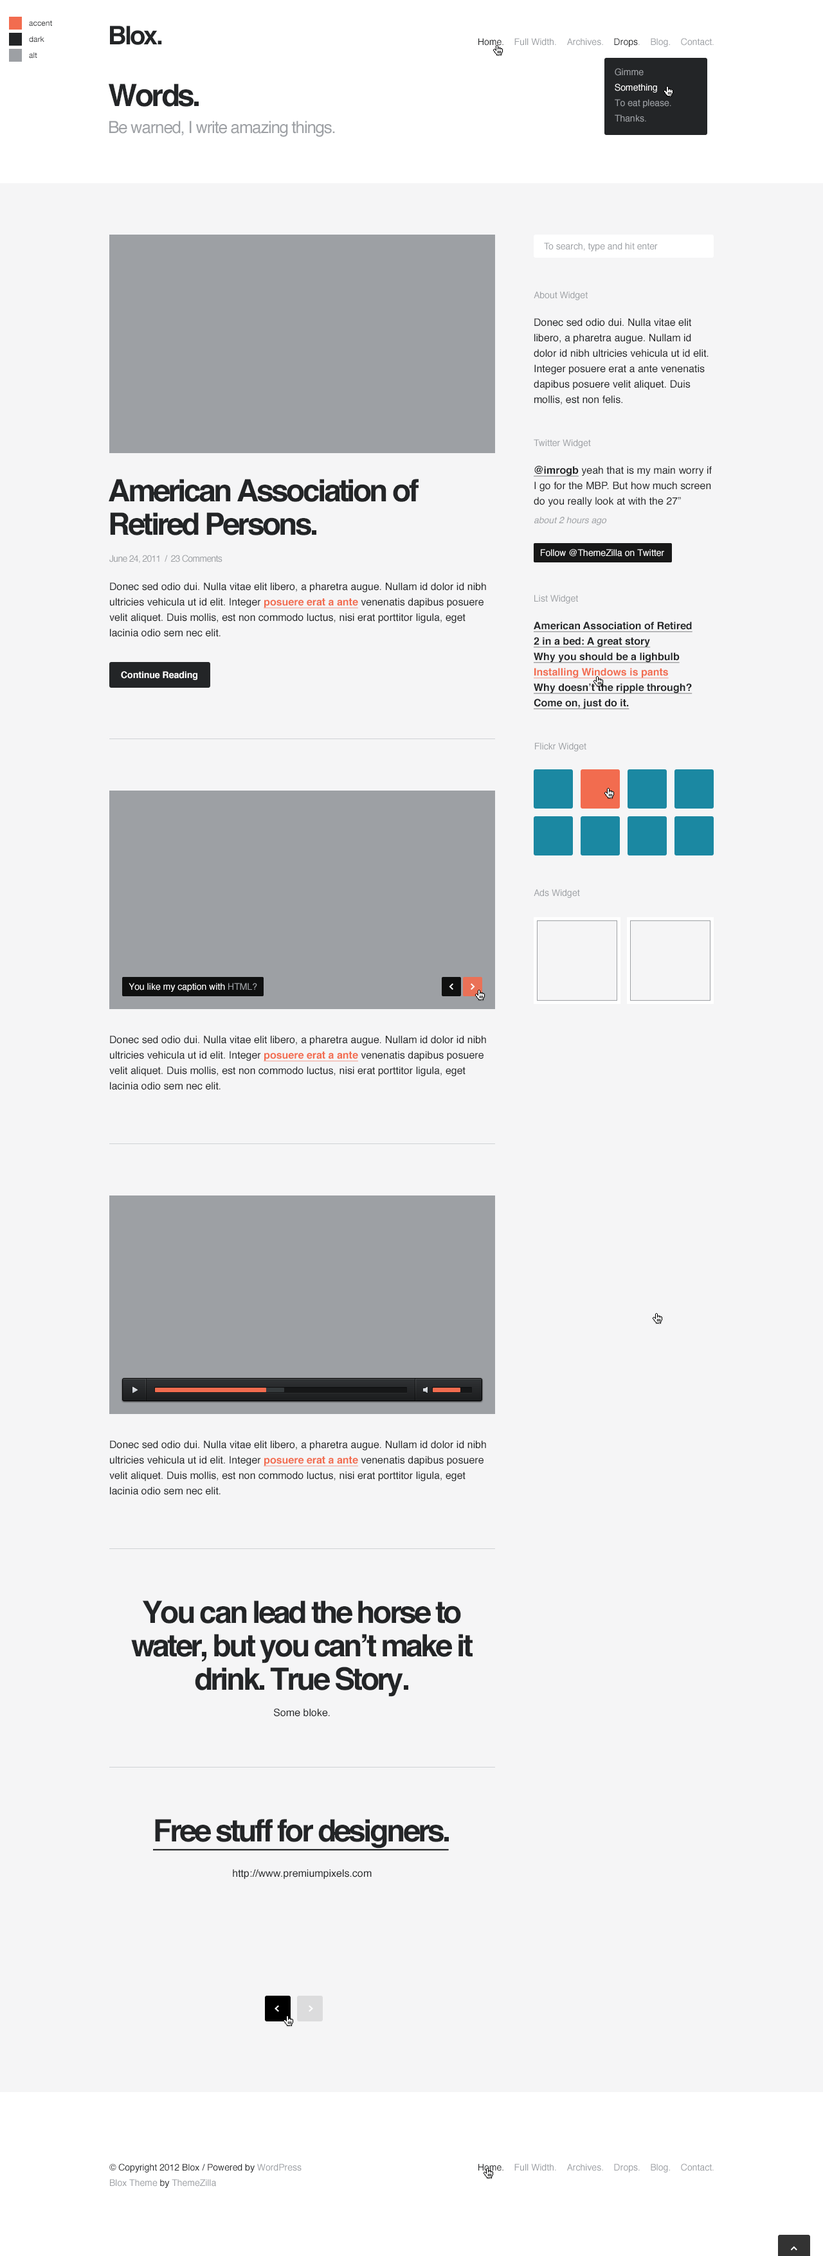
<style>
.page{position:relative;width:823px;height:2256px;background:#f5f5f6}
.page>*{position:absolute;margin:0}
.t1{font:7.7px/16.1px "HelveticaNeue";color:#2c2d31}
.t2{font:25.7px "Helvetica-Bold";letter-spacing:-0.075em;color:#232527}
.t3{font:9px "Helvetica";color:#9da0a4}
.t4{font:9px "Helvetica";color:#232527}
.t5{font:9px/15.4px "Helvetica";color:#9da0a4}
.t6{font:9px/15.4px "Helvetica";color:#ffffff}
.t7{font:30.9px "Helvetica-Bold";letter-spacing:-0.075em;color:#232527}
.t8{font:16.7px "Helvetica";letter-spacing:-0.05em;color:#9da0a4}
.t9{font:10.3px/15.4px "Helvetica";color:#232527}
.t10{font:10.3px/15.4px "Helvetica-Bold";color:#232527;text-decoration:underline}
.t11{font:30.9px/33.4px "Helvetica-Bold";letter-spacing:-0.075em;color:#232527}
.t12{font:9px "Helvetica-Oblique";color:#9da0a4}
.t13{font:9px "Helvetica";letter-spacing:-0.05em;color:#9da0a4}
.t14{font:9px "Helvetica";color:#ffffff}
.t15{font:10.3px/15.4px "Helvetica-Bold";color:#f26c4f;text-decoration:underline}
.t16{font:9px "Helvetica-Bold";color:#ffffff}
.t17{font:10.3px "Helvetica";color:#232527}
.t18{font:30.9px "Helvetica-Bold";letter-spacing:-0.075em;color:#232527;text-decoration:underline}
.t19{font:9px/15.4px "Helvetica";color:#232527}
</style>
<div class="page">
<p class="t1" style="left:29px;top:21px;width:23px;height:38px">accent<br>dark<br>alt</p>
<p class="t2" style="left:110px;top:26px;width:52px;height:19px">Blox.</p>
<p class="t3" style="left:478px;top:38px;width:236px;height:9px"><span class="t4">Home.</span>    Full Width.    Archives.    <span class="t4">Drops</span>.    Blog.    Contact.</p>
<p class="t5" style="left:615px;top:68px;width:56px;height:54px">Gimme<br><span class="t6">Something<br></span>To eat please.<br>Thanks.</p>
<p class="t7" style="left:109px;top:84px;width:90px;height:23px">Words.</p>
<p class="t8" style="left:109px;top:121px;width:226px;height:16px">Be warned, I write amazing things.</p>
<p class="t3" style="left:544px;top:242px;width:114px;height:9px">To search, type and hit enter</p>
<p class="t3" style="left:534px;top:291px;width:54px;height:9px">About Widget</p>
<p class="t9" style="left:534px;top:318px;width:174px;height:87px">Donec sed odio dui. Nulla vitae elit libero, a pharetra augue. Nullam id dolor id nibh ultricies vehicula ut id elit. Integer posuere erat a ante venenatis dapibus posuere velit aliquet. Duis mollis, est non felis.</p>
<p class="t3" style="left:534px;top:439px;width:57px;height:9px">Twitter Widget</p>
<p class="t9" style="left:534px;top:465px;width:178px;height:42px"><span class="t10">@imrogb</span> yeah that is my main worry if I go for the MBP. But how much screen do you really look at with the 27”</p>
<p class="t11" style="left:109px;top:479px;width:310px;height:57px">American Association of Retired Persons.</p>
<p class="t12" style="left:534px;top:517px;width:73px;height:8px">about 2 hours ago</p>
<p class="t13" style="left:109px;top:555px;width:113px;height:8px">June 24, 2011  /  23 Comments</p>
<p class="t14" style="left:541px;top:549px;width:123px;height:8px">Follow @ThemeZilla on Twitter</p>
<p class="t9" style="left:109px;top:582px;width:377px;height:55px">Donec sed odio dui. Nulla vitae elit libero, a pharetra augue. Nullam id dolor id nibh ultricies vehicula ut id elit. Integer <span class="t15">posuere erat a ante</span> venenatis dapibus posuere velit aliquet. Duis mollis, est non commodo luctus, nisi erat porttitor ligula, eget lacinia odio sem nec elit.</p>
<p class="t3" style="left:534px;top:595px;width:44px;height:9px">List Widget</p>
<p class="t10" style="left:534px;top:622px;width:158px;height:88px">American Association of Retired<br>2 in a bed: A great story<br>Why you should be a lighbulb<br><span class="t15">Installing Windows is pants<br></span>Why doesn’t the ripple through?<br>Come on, just do it.</p>
<p class="t16" style="left:121px;top:671px;width:76px;height:9px">Continue Reading</p>
<p class="t3" style="left:535px;top:742px;width:51px;height:10px">Flickr Widget</p>
<p class="t3" style="left:534px;top:889px;width:46px;height:9px">Ads Widget</p>
<p class="t14" style="left:129px;top:983px;width:128px;height:9px">You like my caption with <span class="t3">HTML?</span></p>
<p class="t9" style="left:109px;top:1036px;width:377px;height:54px">Donec sed odio dui. Nulla vitae elit libero, a pharetra augue. Nullam id dolor id nibh ultricies vehicula ut id elit. Integer <span class="t15">posuere erat a ante</span> venenatis dapibus posuere velit aliquet. Duis mollis, est non commodo luctus, nisi erat porttitor ligula, eget lacinia odio sem nec elit.</p>
<p class="t9" style="left:109px;top:1441px;width:377px;height:54px">Donec sed odio dui. Nulla vitae elit libero, a pharetra augue. Nullam id dolor id nibh ultricies vehicula ut id elit. Integer <span class="t15">posuere erat a ante</span> venenatis dapibus posuere velit aliquet. Duis mollis, est non commodo luctus, nisi erat porttitor ligula, eget lacinia odio sem nec elit.</p>
<p class="t11" style="left:131px;top:1601px;width:342px;height:96px;text-align:center">You can lead the horse to water, but you can’t make it drink. True Story.</p>
<p class="t17" style="left:274px;top:1709px;width:56px;height:8px">Some bloke.</p>
<p class="t18" style="left:153px;top:1819px;width:296px;height:32px">Free stuff for designers.</p>
<p class="t17" style="left:233px;top:1869px;width:139px;height:11px">http://www.premiumpixels.com</p>
<p class="t19" style="left:109px;top:2164px;width:193px;height:24px">© Copyright 2012 Blox / Powered by <span class="t5">WordPress<br>Blox Theme</span> by <span class="t5">ThemeZilla</span></p>
<p class="t3" style="left:478px;top:2164px;width:236px;height:9px"><span class="t4">Home.</span>    Full Width.    Archives.    Drops.    Blog.    Contact.</p>
</div>
